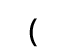
<style>
.page{position:relative;width:70px;height:55px;background:#ffffff}
.page>*{position:absolute;margin:0}
.t1{font:31.8px "DroidSans";color:#000000}
</style>
<div class="page">
<p class="t1" style="left:29px;top:18px;width:8px;height:29px">(</p>
</div>
